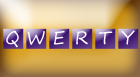
<style>
.page{position:relative;width:140px;height:77px}
.page>*{position:absolute;margin:0}
.t1{font:17.9px "SegoePrint";color:#ffffff}
</style>
<div class="page">
<p class="t1" style="left:6px;top:30px;width:13px;height:18px">Q</p>
<p class="t1" style="left:121px;top:30px;width:14px;height:15px">Y</p>
<p class="t1" style="left:27px;top:31px;width:18px;height:14px">W</p>
<p class="t1" style="left:54px;top:31px;width:11px;height:14px">E</p>
<p class="t1" style="left:76px;top:31px;width:12px;height:14px">R</p>
<p class="t1" style="left:98px;top:31px;width:15px;height:14px">T</p>
</div>
